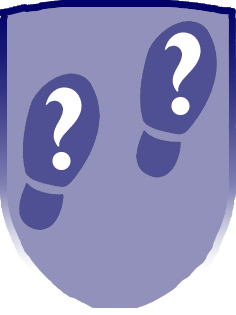
<style>
.page{position:relative;width:236px;height:315px;background:#9191bb}
.page>*{position:absolute;margin:0}
.t1{font:112px "PerpetuaTitlingMT-Bold";color:#ffffff}
</style>
<div class="page">
<p class="t1" style="left:164px;top:32px;width:37px;height:83px">?</p>
<p class="t1" style="left:45px;top:87px;width:37px;height:83px">?</p>
</div>
